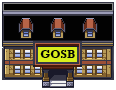
<style>
.page{position:relative;width:116px;height:90px;background:#020202}
.page>*{position:absolute;margin:0}
.t1{font:12px "Rockwell-Bold";color:#020202}
</style>
<div class="page">
<p class="t1" style="left:40px;top:50px;width:35px;height:8px">GOSB</p>
</div>
